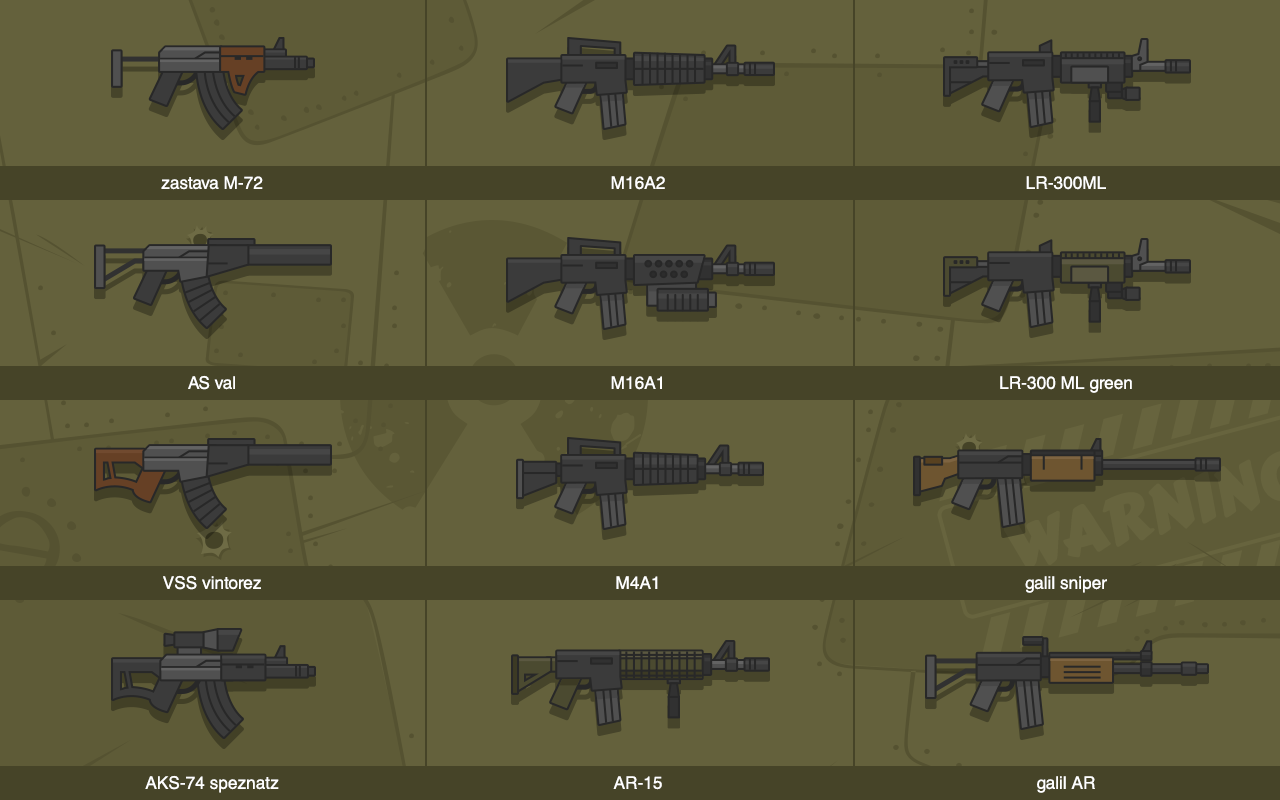
<style>
.page{position:relative;width:1280px;height:800px;background:#64613c}
.page>*{position:absolute;margin:0}
.t1{font:17.4px/200px "HelveticaCE-Regular";color:#ffffff}
</style>
<div class="page">
<p class="t1" style="left:145px;top:176px;width:134px;height:617px;text-align:center">zastava M-72<br>AS val<br>VSS vintorez<br>AKS-74 speznatz</p>
<p class="t1" style="left:611px;top:176px;width:54px;height:614px;text-align:center">M16A2<br>M16A1<br>M4A1<br>AR-15</p>
<p class="t1" style="left:1000px;top:176px;width:132px;height:617px;text-align:center">LR-300ML<br>LR-300 ML green<br>galil sniper<br>galil AR</p>
</div>
